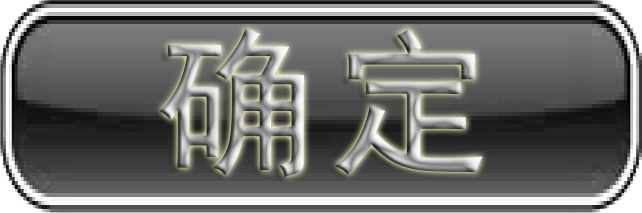
<style>
.page{position:relative;width:642px;height:213px}
.page>*{position:absolute;margin:0}
.t1{font:157.5px "SimHei";letter-spacing:0.075em;font-weight:bold}
</style>
<div class="page">
<p class="t1" style="left:159px;top:28px;width:324px;height:149px">确定</p>
</div>
